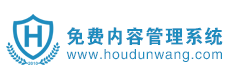
<style>
.page{position:relative;width:229px;height:79px;background:#ffffff}
.page>*{position:absolute;margin:0}
.t1{font:19.2px "FZDHTJW--GB1-0";letter-spacing:0.05em;color:#1e8cbe}
.t2{font:14px "FZHTJW--GB1-0";letter-spacing:0.05em;color:#1e8cbe}
</style>
<div class="page">
<p class="t1" style="left:67px;top:27px;width:156px;height:19px">免费内容管理系统</p>
<p class="t2" style="left:66px;top:49px;width:156px;height:13px">www.houdunwang.com</p>
</div>
